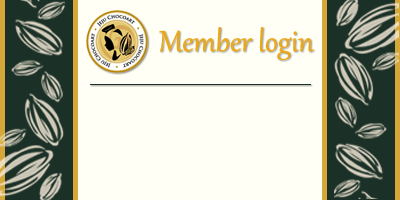
<style>
.page{position:relative;width:400px;height:200px;background:#fffff5}
.page>*{position:absolute;margin:0}
.t1{font:36px "Gabriola";color:#eca816}
</style>
<div class="page">
<p class="t1" style="left:159px;top:27px;width:155px;height:34px">Member login</p>
</div>
